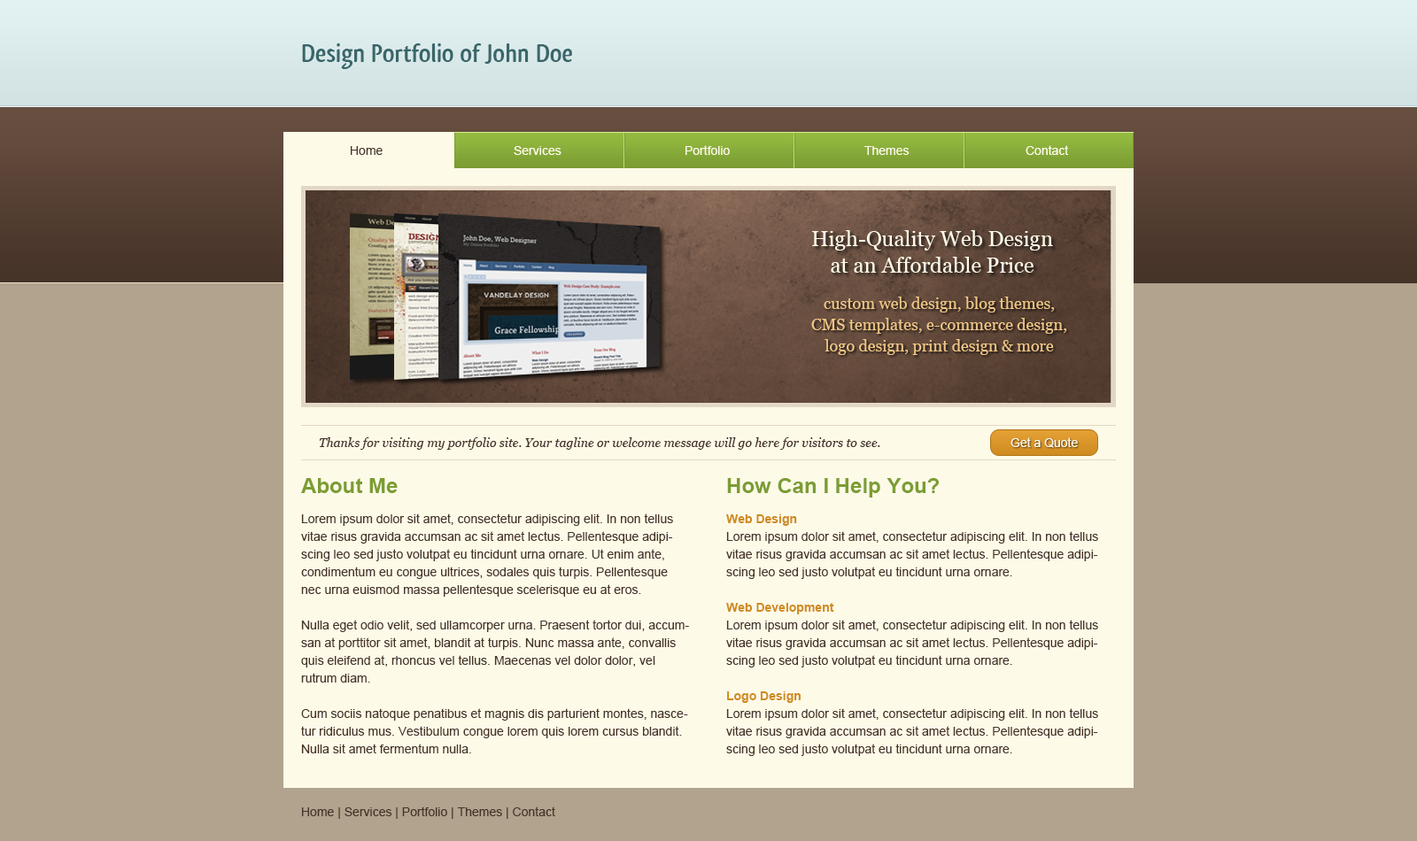
<style>
.page{position:relative;width:1417px;height:841px;background:#b1a38d}
.page>*{position:absolute;margin:0}
.t1{font:26.6px "QlassikBold";color:#3a6669}
.t2{font:12.4px "ArialMT";color:#463328}
.t3{font:12.4px "ArialMT";color:#fefae8}
.t4{font:21.3px/26.6px "Georgia";color:#fefae8}
.t5{font:15.9px/21.3px "Georgia";color:#f0c786}
.t6{font:12.4px "Georgia-Italic";color:#463328}
.t7{font:12.4px/17.7px "ArialMT";color:#463328}
.t8{font:21.3px/12.4px "Arial-BoldMT";color:#7b9d33}
.t9{font:12.4px/17.7px "Arial-BoldMT";color:#cf8b1f}
</style>
<div class="page">
<p class="t1" style="left:302px;top:43px;width:270px;height:26px">Design Portfolio of John Doe</p>
<p class="t2" style="left:351px;top:146px;width:32px;height:9px">Home</p>
<p class="t3" style="left:514px;top:146px;width:48px;height:9px">Services</p>
<p class="t3" style="left:686px;top:145px;width:44px;height:10px">Portfolio</p>
<p class="t3" style="left:864px;top:146px;width:46px;height:9px">Themes</p>
<p class="t3" style="left:1026px;top:145px;width:43px;height:10px">Contact</p>
<p class="t4" style="left:812px;top:230px;width:241px;height:43px;text-align:center">High-Quality Web Design<br>at an Affordable Price</p>
<p class="t5" style="left:811px;top:297px;width:256px;height:58px;text-align:center">custom web design, blog themes,<br>CMS templates, e-commerce design,<br>logo design, print design &amp; more</p>
<p class="t6" style="left:319px;top:438px;width:561px;height:12px">Thanks for visiting my portfolio site. Your tagline or welcome message will go here for visitors to see.</p>
<p class="t3" style="left:1011px;top:438px;width:67px;height:10px">Get a Quote</p>
<p class="t7" style="left:301px;top:478px;width:388px;height:276px"><span class="t8">About Me<br><br></span>Lorem ipsum dolor sit amet, consectetur adipiscing elit. In non tellus vitae risus gravida accumsan ac sit amet lectus. Pellentesque adipiscing leo sed justo volutpat eu tincidunt urna ornare. Ut enim ante, condimentum eu congue ultrices, sodales quis turpis. Pellentesque nec urna euismod massa pellentesque scelerisque eu at eros. <br><br>Nulla eget odio velit, sed ullamcorper urna. Praesent tortor dui, accumsan at porttitor sit amet, blandit at turpis. Nunc massa ante, convallis quis eleifend at, rhoncus vel tellus. Maecenas vel dolor dolor, vel rutrum diam. <br><br>Cum sociis natoque penatibus et magnis dis parturient montes, nascetur ridiculus mus. Vestibulum congue lorem quis lorem cursus blandit. Nulla sit amet fermentum nulla.</p>
<p class="t7" style="left:726px;top:478px;width:372px;height:278px"><span class="t8">How Can I Help You?<br><br></span><span class="t9">Web Design<br></span>Lorem ipsum dolor sit amet, consectetur adipiscing elit. In non tellus vitae risus gravida accumsan ac sit amet lectus. Pellentesque adipiscing leo sed justo volutpat eu tincidunt urna ornare.<br><br><span class="t9">Web Development<br></span>Lorem ipsum dolor sit amet, consectetur adipiscing elit. In non tellus vitae risus gravida accumsan ac sit amet lectus. Pellentesque adipiscing leo sed justo volutpat eu tincidunt urna ornare.<br><br><span class="t9">Logo Design<br></span>Lorem ipsum dolor sit amet, consectetur adipiscing elit. In non tellus vitae risus gravida accumsan ac sit amet lectus. Pellentesque adipiscing leo sed justo volutpat eu tincidunt urna ornare.</p>
<p class="t2" style="left:302px;top:807px;width:253px;height:12px">Home | Services | Portfolio | Themes | Contact</p>
</div>
